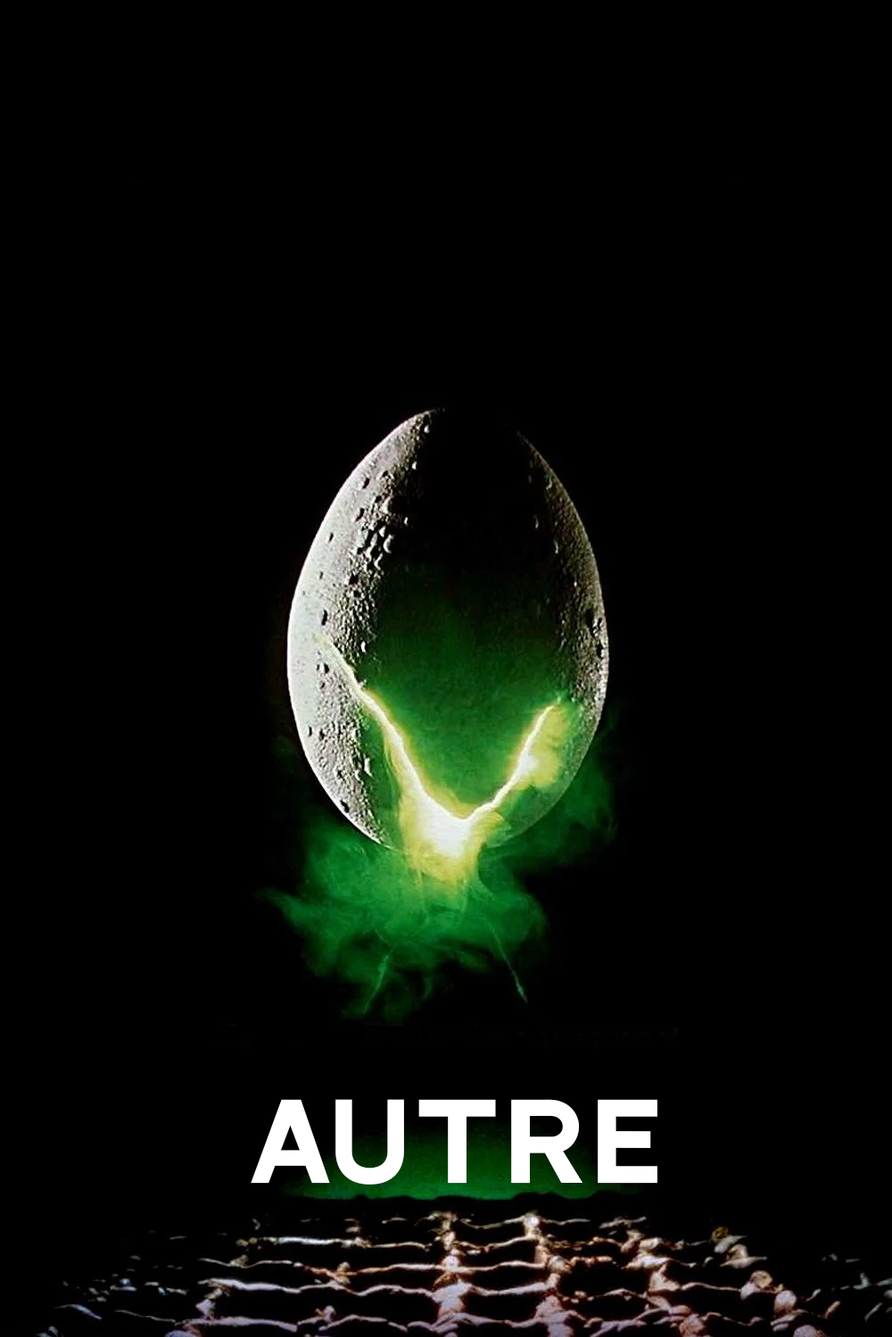
<style>
.page{position:relative;width:892px;height:1337px;background:#000000}
.page>*{position:absolute;margin:0}
.t1{font:102.5px "NeutralFaceBold";letter-spacing:0.1em;color:#ffffff;font-variant:small-caps}
</style>
<div class="page">
<p class="t1" style="left:251px;top:1099px;width:406px;height:86px">AUTRE</p>
</div>
